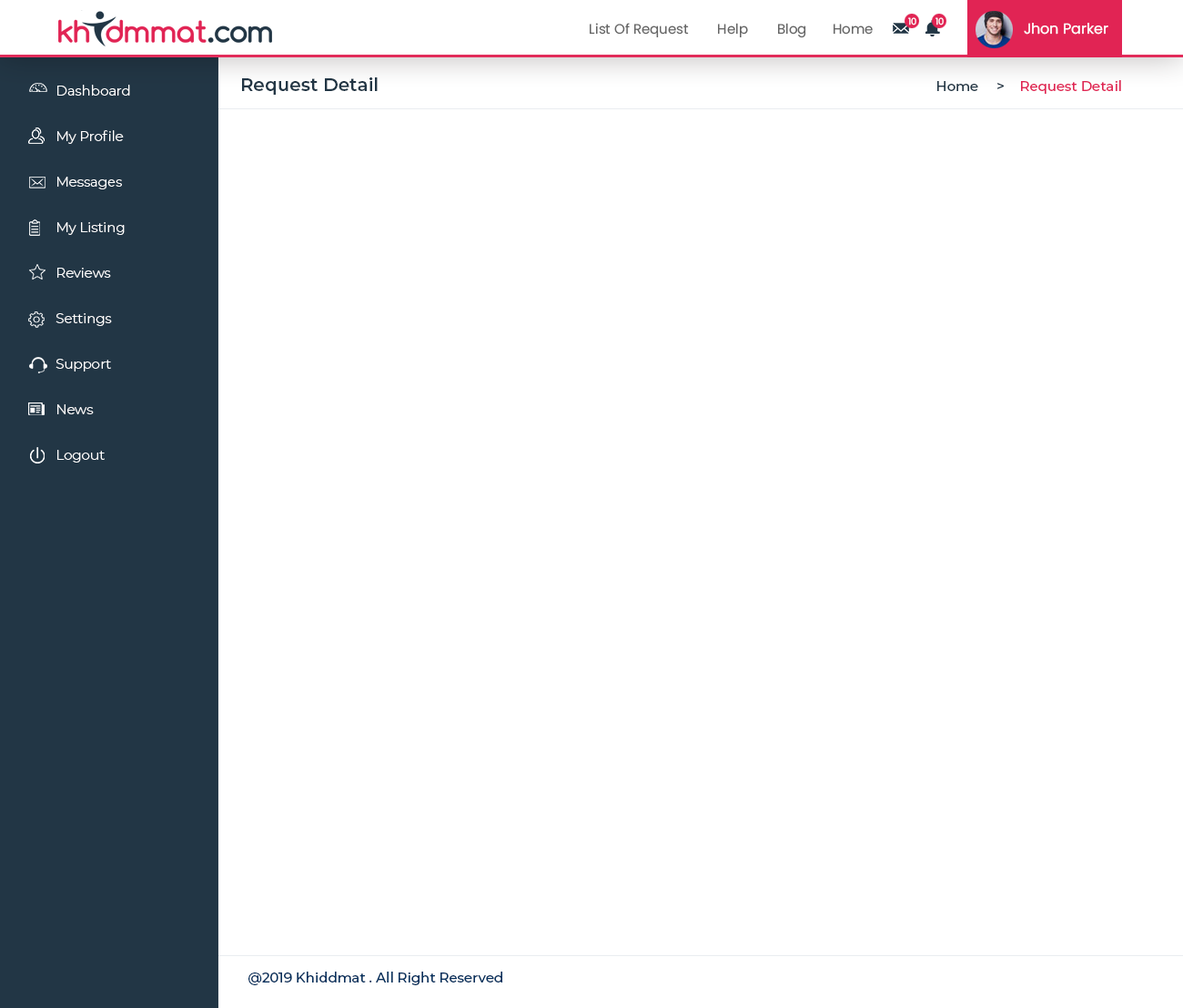
<style>
.page{position:relative;width:1183px;height:1008px;background:#ffffff}
.page>*{position:absolute;margin:0}
.t1{font:9.1px "Poppins-Regular";color:#ffffff}
.t2{font:13.7px "Poppins-Regular";color:#666666}
.t3{font:12.7px "Poppins-Regular";color:#666666}
.t4{font:14.6px "Poppins-Regular";color:#ffffff}
.t5{font:18.2px "Montserrat-SemiBold";color:#223645}
.t6{font:13.7px/45.5px "Montserrat-Light";color:#ffffff}
.t7{font:13.7px "Montserrat-Medium";color:#e12454}
.t8{font:13.7px "Montserrat-Medium";color:#05315e}
.t9{font:13.7px "Montserrat-Medium";color:#223645}
</style>
<div class="page">
<p class="t1" style="left:908px;top:17px;width:9px;height:8px">10</p>
<p class="t1" style="left:936px;top:17px;width:8px;height:8px">10</p>
<p class="t2" style="left:590px;top:23px;width:519px;height:15px"><span class="t3">       </span>  List Of Request        Help        Blog       Home                                          <span class="t4">Jhon Parker</span></p>
<p class="t5" style="left:242px;top:77px;width:136px;height:18px">Request Detail</p>
<p class="t6" style="left:56px;top:85px;width:74px;height:377px">Dashboard<br>My Profile<br>Messages<br>My Listing<br>Reviews<br>Settings<br>Support<br>News<br>Logout</p>
<p class="t7" style="left:938px;top:80px;width:183px;height:14px"><span class="t8">    </span><span class="t9">Home     &gt;    </span>Request Detail</p>
<p class="t8" style="left:249px;top:971px;width:253px;height:14px">@2019 Khiddmat . All Right Reserved</p>
</div>
